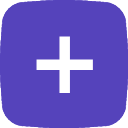
<style>
.page{position:relative;width:128px;height:128px;background:#5543bb}
.page>*{position:absolute;margin:0}
.t1{font:90px "DejaVuSans-Bold";color:#ffffff}
</style>
<div class="page">
<p class="t1" style="left:36px;top:36px;width:57px;height:57px">+</p>
</div>
